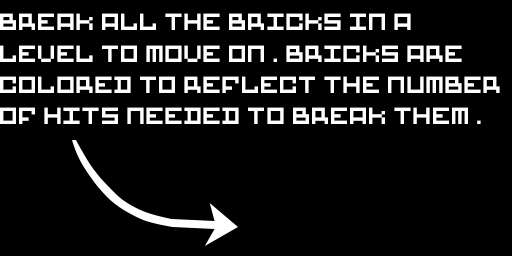
<style>
.page{position:relative;width:512px;height:256px;background:#000000}
.page>*{position:absolute;margin:0}
.t1{font:25.9px "BIGBLOCKS";color:#fefefe}
</style>
<div class="page">
<p class="t1" style="left:0px;top:13px;width:500px;height:111px">BREAK ALL THE BRICKS IN A LEVEL TO MOVE ON. BRICKS ARE COLORED TO REFLECT THE NUMBER OF HITS NEEDED TO BREAK THEM.</p>
</div>
